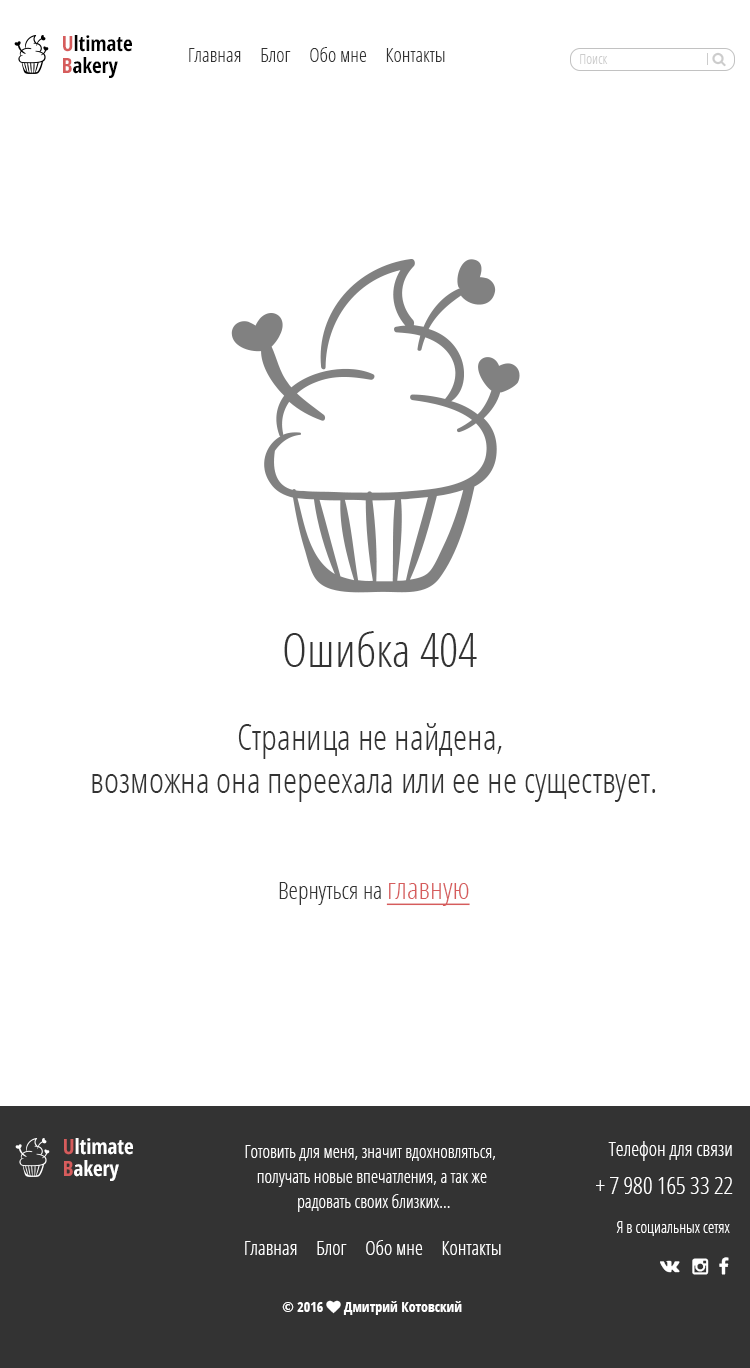
<style>
.page{position:relative;width:750px;height:1368px;background:#ffffff}
.page>*{position:absolute;margin:0}
.t1{font:21.1px/21.9px "OpenSans-CondensedBold";color:#000000}
.t2{font:21.1px/21.9px "OpenSans-CondensedBold";color:#d65c5c}
.t3{font:20px "OpenSans-CondensedLight";color:#333333}
.t4{font:14px "OpenSans-CondensedLight";color:#cccccc}
.t5{font:48px "OpenSans-CondensedLight";color:#333333}
.t6{font:36px/43px "OpenSans-CondensedLight";color:#333333}
.t7{font:24px "OpenSans-CondensedLight";color:#333333}
.t8{font:30px "OpenSans-CondensedLight";color:#d65c5c;text-decoration:underline}
.t9{font:21.1px/21.9px "OpenSans-CondensedBold";color:#ffffff}
.t10{font:18px/25px "OpenSans-CondensedLight";color:#ffffff}
.t11{font:20px "OpenSans-CondensedLight";color:#ffffff}
.t12{font:24px "OpenSans-CondensedLight";color:#ffffff}
.t13{font:16px "OpenSans-CondensedLight";color:#ffffff}
</style>
<div class="page">
<p class="t1" style="left:63px;top:35px;width:69px;height:43px"><span class="t2">U</span>ltimate<br><span class="t2">B</span>akery</p>
<p class="t3" style="left:189px;top:47px;width:256px;height:15px">Главная     Блог     Обо мне     Контакты</p>
<p class="t4" style="left:580px;top:54px;width:28px;height:10px">Поиск</p>
<p class="t5" style="left:284px;top:631px;width:193px;height:36px">Ошибка 404</p>
<p class="t6" style="left:92px;top:723px;width:564px;height:79px;text-align:center">Страница не найдена, <br>возможна она переехала или ее не существует.</p>
<p class="t7" style="left:279px;top:882px;width:191px;height:24px">Вернуться на <span class="t8">главную</span></p>
<p class="t9" style="left:64px;top:1138px;width:69px;height:43px"><span class="t2">U</span>ltimate<br><span class="t2">B</span>akery</p>
<p class="t10" style="left:245px;top:1145px;width:250px;height:67px;text-align:center">Готовить для меня, значит вдохновляться, <br>получать новые впечатления, а так же<br> радовать своих близких...</p>
<p class="t11" style="left:608px;top:1141px;width:124px;height:20px">Телефон для связи</p>
<p class="t12" style="left:596px;top:1177px;width:137px;height:17px">+ 7 980 165 33 22</p>
<p class="t13" style="left:616px;top:1221px;width:114px;height:15px">Я в социальных сетях</p>
<p class="t11" style="left:245px;top:1240px;width:256px;height:15px">Главная     Блог     Обо мне     Контакты</p>
</div>
